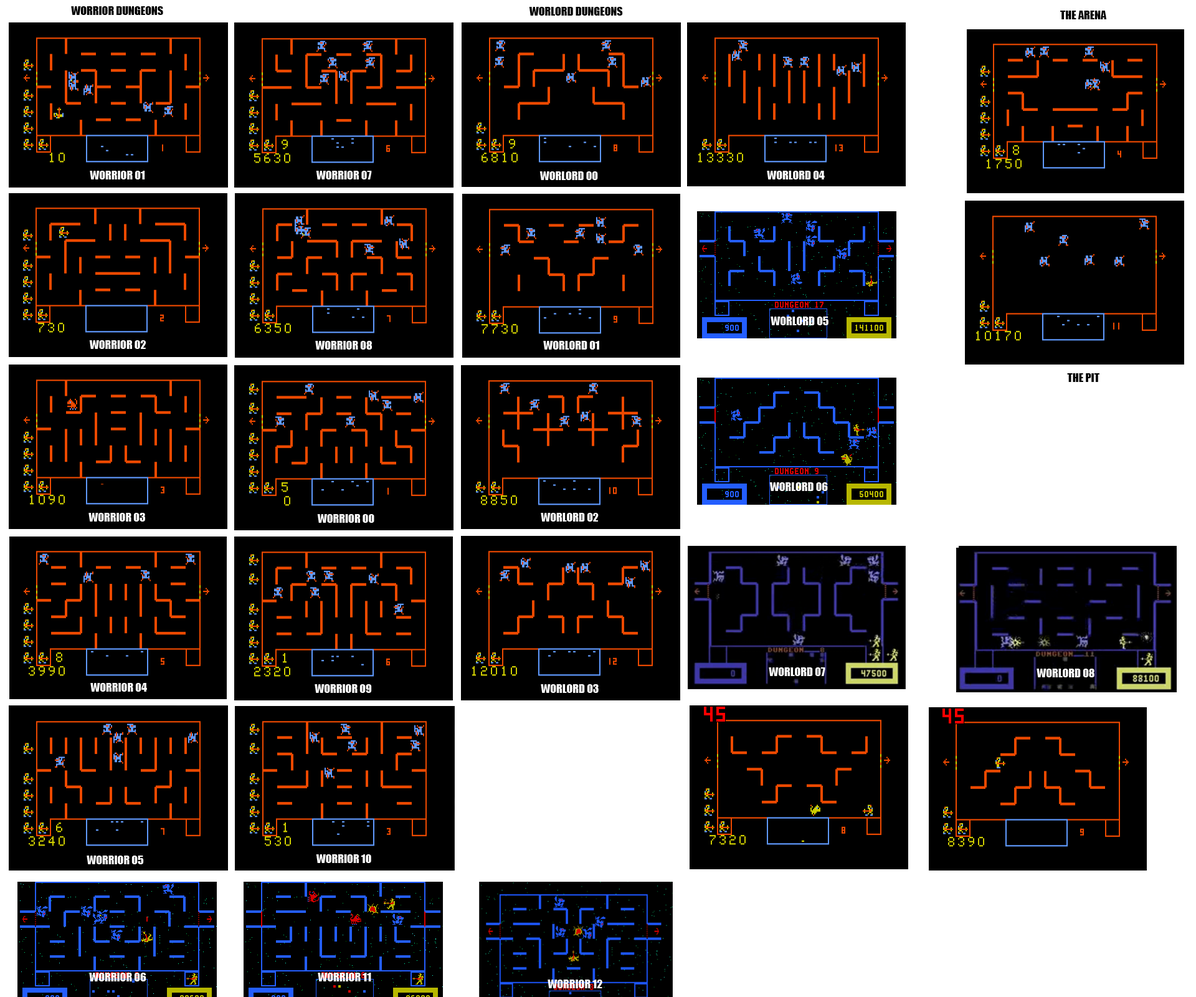
<style>
.page{position:relative;width:1196px;height:997px;background:#000000}
.page>*{position:absolute;margin:0}
.t1{font:11.2px "Impact";color:#000000}
.t2{font:11.2px "Impact";color:#ffffff}
</style>
<div class="page">
<p class="t1" style="left:71px;top:6px;width:92px;height:9px">WORRIOR DUNGEONS</p>
<p class="t1" style="left:529px;top:7px;width:94px;height:9px">WORLORD DUNGEONS</p>
<p class="t1" style="left:1060px;top:11px;width:47px;height:8px">THE ARENA</p>
<p class="t2" style="left:90px;top:171px;width:55px;height:8px">WORRIOR 01</p>
<p class="t2" style="left:316px;top:171px;width:56px;height:8px">WORRIOR 07</p>
<p class="t2" style="left:540px;top:171px;width:58px;height:9px">WORLORD 00</p>
<p class="t2" style="left:767px;top:171px;width:58px;height:8px">WORLORD 04</p>
<p class="t2" style="left:771px;top:316px;width:58px;height:9px">WORLORD 05</p>
<p class="t2" style="left:89px;top:340px;width:57px;height:9px">WORRIOR 02</p>
<p class="t2" style="left:315px;top:341px;width:57px;height:9px">WORRIOR 08</p>
<p class="t2" style="left:543px;top:341px;width:56px;height:9px">WORLORD 01</p>
<p class="t1" style="left:1067px;top:373px;width:33px;height:9px">THE PIT</p>
<p class="t2" style="left:769px;top:482px;width:59px;height:9px">WORLORD 06</p>
<p class="t2" style="left:88px;top:513px;width:57px;height:8px">WORRIOR 03</p>
<p class="t2" style="left:317px;top:514px;width:57px;height:9px">WORRIOR 00</p>
<p class="t2" style="left:541px;top:513px;width:58px;height:8px">WORLORD 02</p>
<p class="t2" style="left:769px;top:667px;width:57px;height:9px">WORLORD 07</p>
<p class="t2" style="left:1037px;top:669px;width:58px;height:8px">WORLORD 08</p>
<p class="t2" style="left:90px;top:683px;width:57px;height:9px">WORRIOR 04</p>
<p class="t2" style="left:315px;top:684px;width:57px;height:9px">WORRIOR 09</p>
<p class="t2" style="left:541px;top:684px;width:58px;height:9px">WORLORD 03</p>
<p class="t2" style="left:87px;top:855px;width:57px;height:9px">WORRIOR 05</p>
<p class="t2" style="left:316px;top:854px;width:55px;height:9px">WORRIOR 10</p>
<p class="t2" style="left:89px;top:973px;width:57px;height:8px">WORRIOR 06</p>
<p class="t2" style="left:318px;top:973px;width:53px;height:8px">WORRIOR 11</p>
<p class="t2" style="left:548px;top:979px;width:54px;height:9px">WORRIOR 12</p>
</div>
